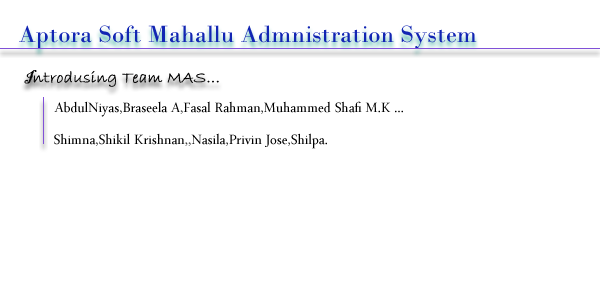
<style>
.page{position:relative;width:600px;height:300px;background:#ffffff}
.page>*{position:absolute;margin:0}
.t1{font:25px "BodoniMT";color:#1225b3}
.t2{font:16.7px "BradleyHandITC";color:#0d0c0c;font-weight:bold}
.t3{font:16.7px "BlackadderITC-Regular";color:#0d0c0c;font-weight:bold}
.t4{font:19.4px "ArabicTypesetting";color:#000000}
</style>
<div class="page">
<p class="t1" style="left:19px;top:25px;width:458px;height:24px">Aptora Soft Mahallu Admnistration System</p>
<p class="t2" style="left:24px;top:70px;width:195px;height:17px"><span class="t3">I</span>ntrodusing Team MAS...</p>
<p class="t4" style="left:54px;top:101px;width:349px;height:16px">AbdulNiyas,Braseela A,Fasal Rahman,Muhammed Shafi M.K ...</p>
<p class="t4" style="left:54px;top:133px;width:273px;height:16px">Shimna,Shikil Krishnan,,Nasila,Privin Jose,Shilpa.</p>
</div>
